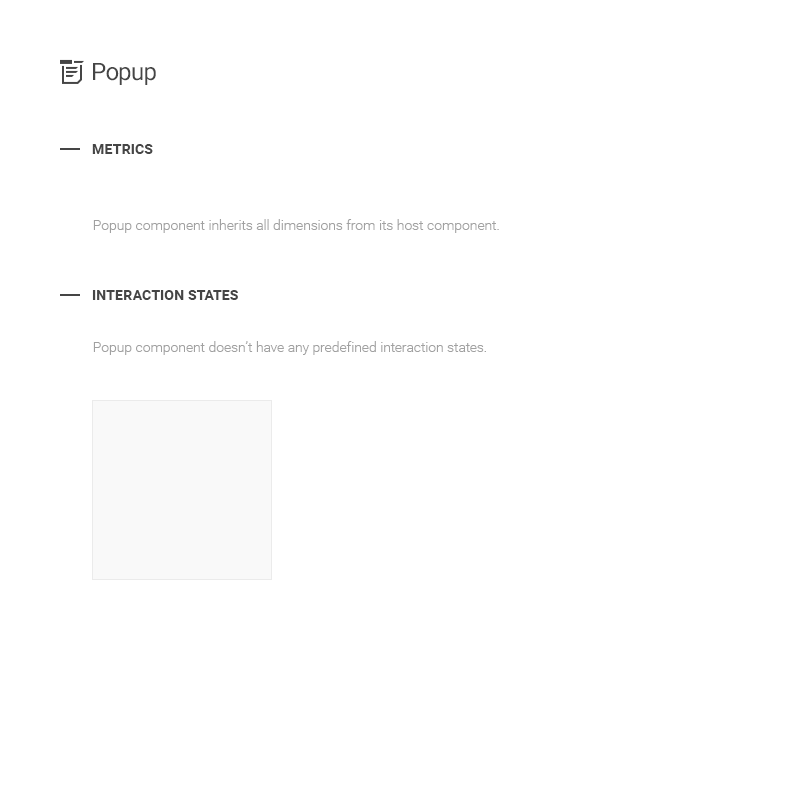
<style>
.page{position:relative;width:800px;height:800px;background:#ffffff}
.page>*{position:absolute;margin:0}
.t1{font:24px "Roboto-Regular";letter-spacing:-0.025em;color:#454545}
.t2{font:14px "Roboto-Bold";letter-spacing:0.01em;color:#454545;text-transform:uppercase}
.t3{font:14px "Roboto-Light";color:#a1a1a1}
</style>
<div class="page">
<p class="t1" style="left:93px;top:63px;width:63px;height:22px">Popup</p>
<p class="t2" style="left:92px;top:144px;width:61px;height:10px">Metrics</p>
<p class="t3" style="left:93px;top:219px;width:406px;height:14px">Popup component inherits all dimensions from its host component.</p>
<p class="t2" style="left:92px;top:290px;width:146px;height:10px">Interaction states</p>
<p class="t3" style="left:93px;top:341px;width:393px;height:14px">Popup component doesn’t have any predefined interaction states.</p>
</div>
